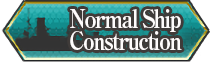
<style>
.page{position:relative;width:210px;height:63px}
.page>*{position:absolute;margin:0}
.t1{font:25px/22px "RyuminPro-ExBold";letter-spacing:-0.08em;color:#fffcfc;scale:0.87 1}
</style>
<div class="page">
<p class="t1" style="left:70px;top:9px;width:112px;height:42px;text-align:center">Normal Ship <br>Construction</p>
</div>
